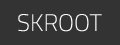
<style>
.page{position:relative;width:120px;height:45px;background:#333333}
.page>*{position:absolute;margin:0}
.t1{font:24px "Cairo-Light";color:#ffffff}
</style>
<div class="page">
<p class="t1" style="left:18px;top:14px;width:84px;height:18px">SKROOT</p>
</div>
